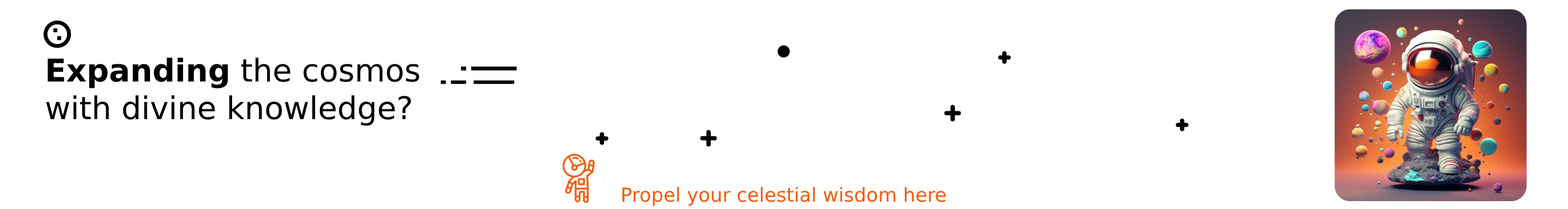
<style>
.page{position:relative;width:1568px;height:209px;background:#ffffff}
.page>*{position:absolute;margin:0}
.t1{font:31.4px "DejaVuSans";color:#000000}
.t2{font:31.4px "DejaVuSans-Bold";color:#000000}
.t3{font:19.3px "DejaVuSans";color:#f15c0b}
</style>
<div class="page">
<p class="t1" style="left:46px;top:57px;width:373px;height:69px"><span class="t2">Expanding</span> the cosmos<br>with divine knowledge?</p>
<p class="t3" style="left:622px;top:187px;width:324px;height:19px">Propel your celestial wisdom here</p>
</div>
